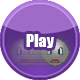
<style>
.page{position:relative;width:80px;height:80px;background:#ffffff}
.page>*{position:absolute;margin:0}
.t1{font:16px "Impact";color:#ffffff}
</style>
<div class="page">
<p class="t1" style="left:26px;top:34px;width:28px;height:14px">Play</p>
</div>
